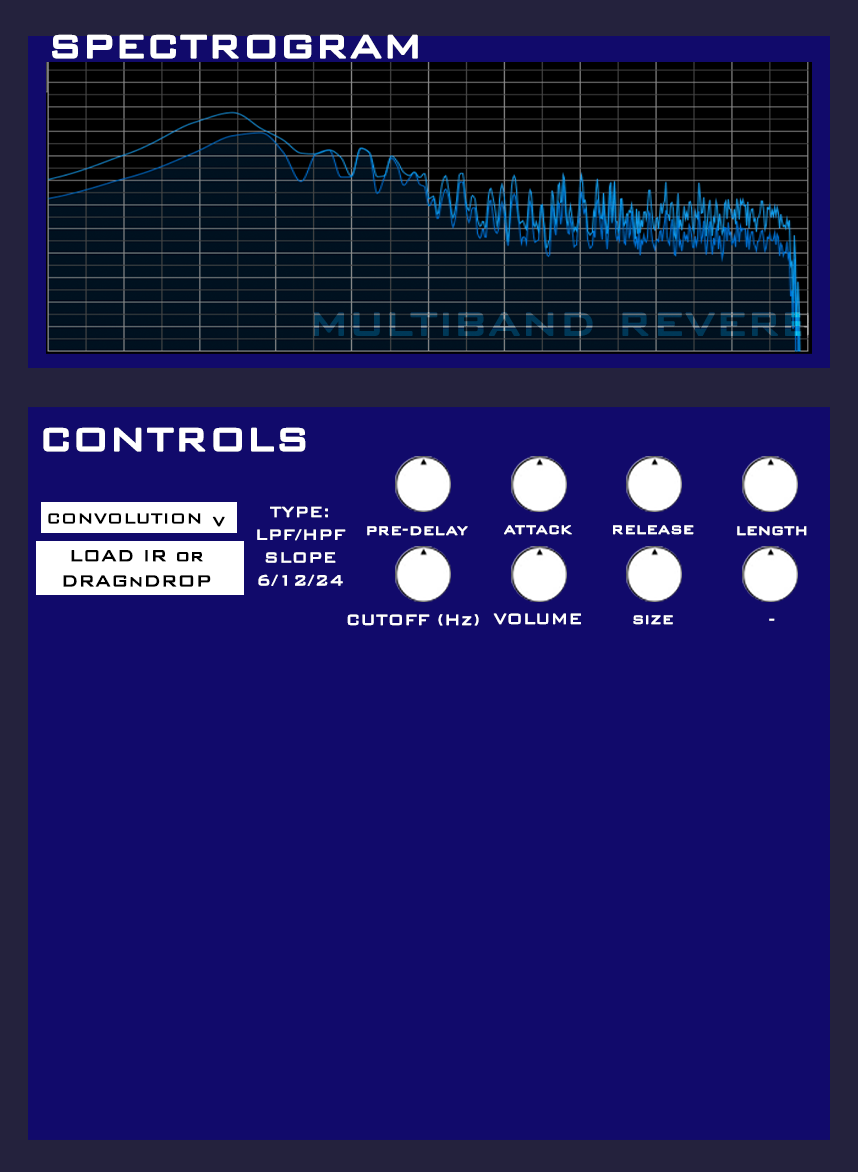
<style>
.page{position:relative;width:858px;height:1172px;background:#110a6b}
.page>*{position:absolute;margin:0}
.t1{font:52px "BankGothic";letter-spacing:-0.005em;color:#ffffff;font-weight:bold}
.t2{font:52px "BankGothic";letter-spacing:-0.005em;font-weight:bold}
.t3{font:19px "BankGothic";letter-spacing:-0.005em;color:#ffffff;font-weight:bold}
.t4{font:19px "BankGothic";letter-spacing:-0.005em;color:#000000;font-weight:bold}
.t5{font:21px "BankGothic";letter-spacing:-0.005em;color:#000000;font-weight:bold}
</style>
<div class="page">
<p class="t1" style="left:52px;top:34px;width:366px;height:25px">spectrogram</p>
<p class="t2" style="left:314px;top:312px;width:497px;height:24px">multiband reverb</p>
<p class="t1" style="left:43px;top:427px;width:263px;height:25px">controls</p>
<p class="t3" style="left:257px;top:506px;width:89px;height:80px;text-align:center">TYPE:<br>LPF/HPF<br>SLOPE<br>6/12/24</p>
<p class="t4" style="left:48px;top:513px;width:153px;height:11px">CONVOLUTION</p>
<p class="t5" style="left:212px;top:516px;width:13px;height:11px">v</p>
<p class="t3" style="left:367px;top:526px;width:101px;height:10px">pre-delay</p>
<p class="t3" style="left:504px;top:525px;width:68px;height:10px">attack</p>
<p class="t3" style="left:613px;top:525px;width:81px;height:10px">release</p>
<p class="t3" style="left:737px;top:526px;width:70px;height:10px">length</p>
<p class="t5" style="left:63px;top:550px;width:148px;height:37px;text-align:center">LOAD IR or<br>DRAGnDROP</p>
<p class="t3" style="left:347px;top:614px;width:132px;height:12px">CUTOFF (Hz)</p>
<p class="t3" style="left:493px;top:613px;width:88px;height:12px">VOLUME</p>
<p class="t3" style="left:633px;top:615px;width:40px;height:10px">size</p>
<p class="t3" style="left:769px;top:618px;width:6px;height:3px">-</p>
</div>
